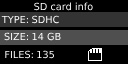
<style>
.page{position:relative;width:128px;height:64px;background:#000000}
.page>*{position:absolute;margin:0}
.t1{font:9.8px "DejaVuSans";color:#eeeeee}
.t2{font:9.8px "DejaVuSans";color:#ffffff}
</style>
<div class="page">
<p class="t1" style="left:34px;top:2px;width:59px;height:9px">SD card info</p>
<p class="t2" style="left:1px;top:15px;width:27px;height:8px">TYPE:</p>
<p class="t2" style="left:32px;top:15px;width:27px;height:9px">SDHC</p>
<p class="t2" style="left:4px;top:32px;width:24px;height:9px">SIZE:</p>
<p class="t2" style="left:32px;top:32px;width:29px;height:9px">14 GB</p>
<p class="t2" style="left:5px;top:50px;width:28px;height:9px">FILES:</p>
<p class="t2" style="left:37px;top:50px;width:17px;height:9px">135</p>
</div>
